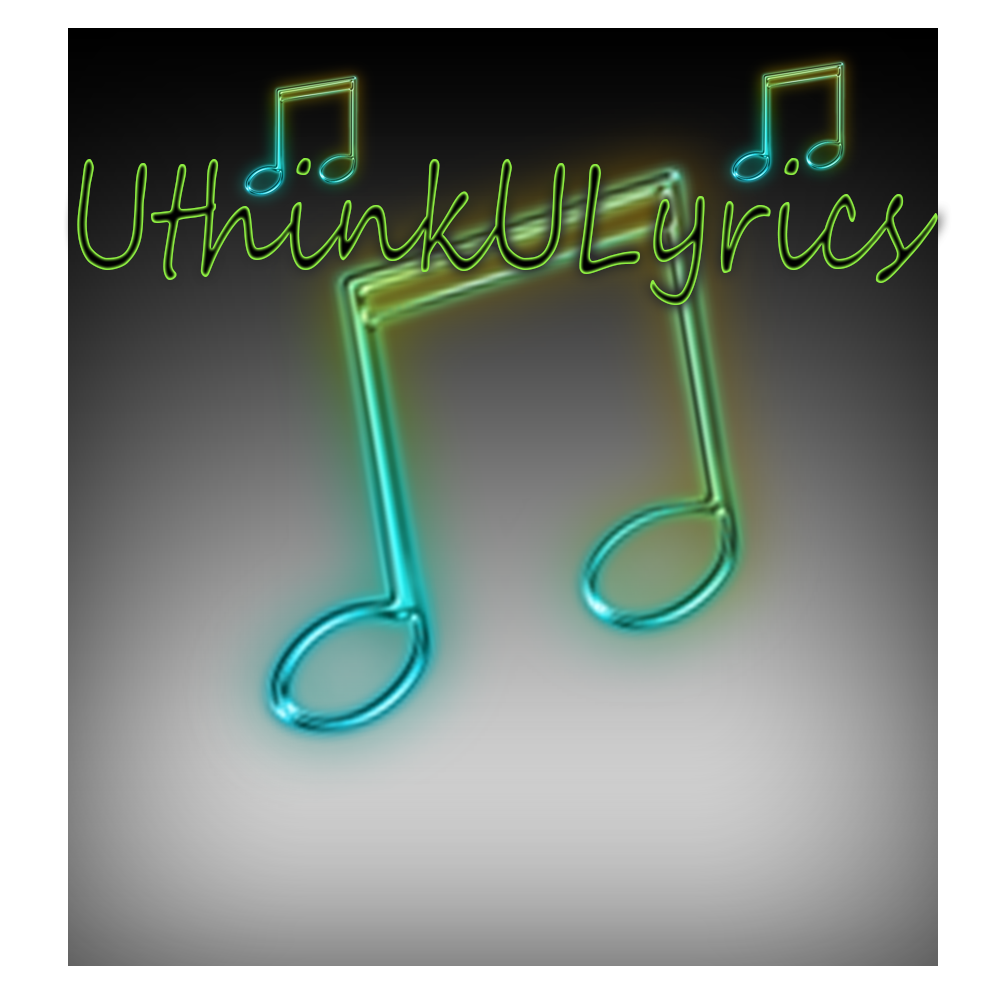
<style>
.page{position:relative;width:1000px;height:1000px}
.page>*{position:absolute;margin:0}
.t1{font:147.2px "SegoeScript";scale:0.74 1}
</style>
<div class="page">
<p class="t1" style="left:77px;top:158px;width:861px;height:147px">UthinkULyrics</p>
</div>
